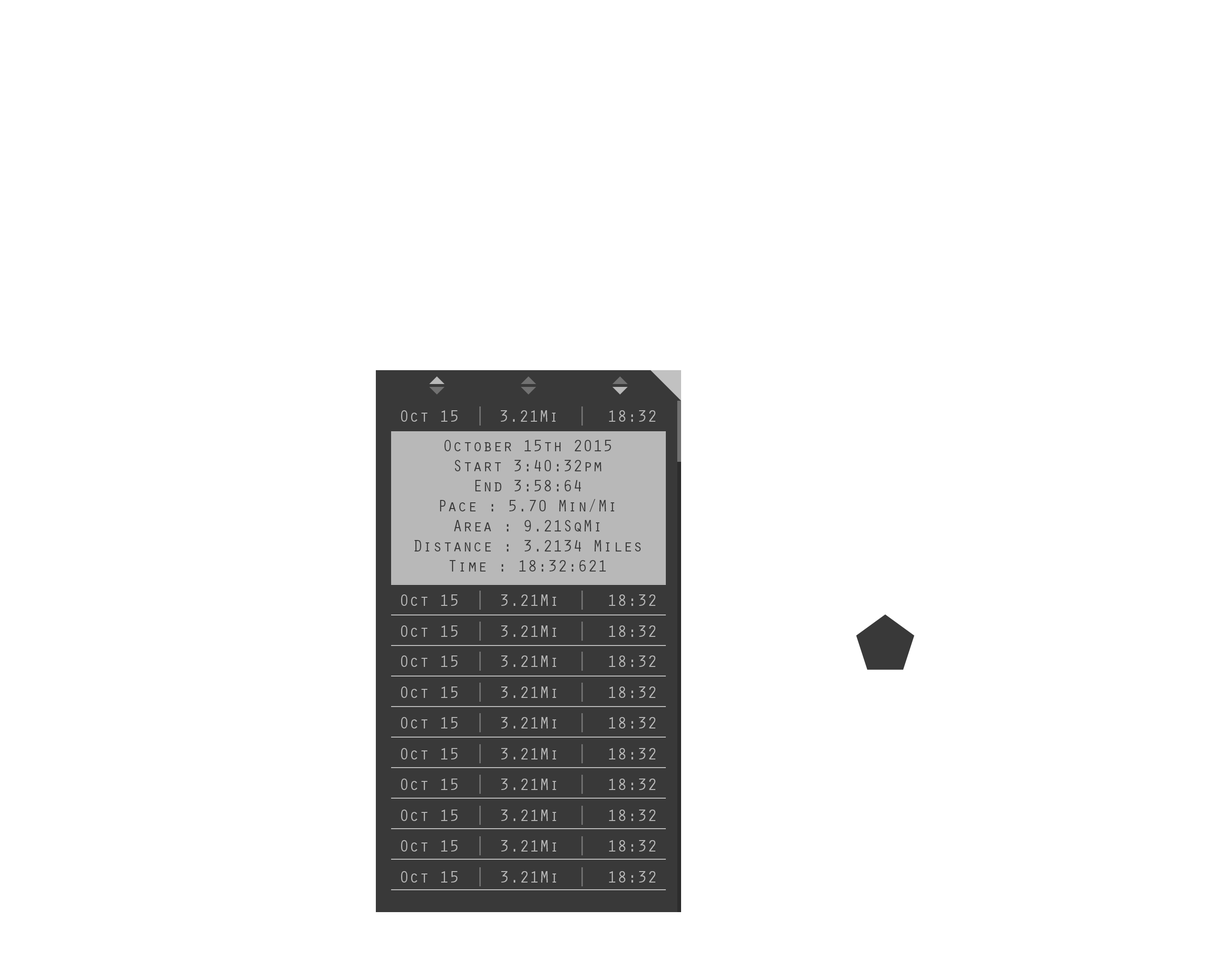
<style>
.page{position:relative;width:1221px;height:977px;background:#ffffff}
.page>*{position:absolute;margin:0}
.t1{font:16.7px "OratorStd";color:#b8b8b8}
.t2{font:16.7px "OratorStd";color:#393939}
</style>
<div class="page">
<p class="t1" style="left:401px;top:410px;width:56px;height:12px">Oct 15</p>
<p class="t1" style="left:501px;top:410px;width:55px;height:12px">3.21Mi</p>
<p class="t1" style="left:609px;top:410px;width:46px;height:12px">18:32</p>
<p class="t2" style="left:414px;top:440px;width:227px;height:131px;text-align:center">October 15th 2015<br>Start 3:40:32pm <br>End 3:58:64  <br>Pace : 5.70 Min/Mi<br>Area : 9.21SqMi <br>Distance : 3.2134 Miles<br>Time : 18:32:621</p>
<p class="t1" style="left:401px;top:594px;width:56px;height:12px">Oct 15</p>
<p class="t1" style="left:501px;top:594px;width:55px;height:12px">3.21Mi</p>
<p class="t1" style="left:609px;top:594px;width:46px;height:12px">18:32</p>
<p class="t1" style="left:401px;top:625px;width:56px;height:12px">Oct 15</p>
<p class="t1" style="left:501px;top:625px;width:55px;height:12px">3.21Mi</p>
<p class="t1" style="left:609px;top:625px;width:46px;height:12px">18:32</p>
<p class="t1" style="left:401px;top:655px;width:56px;height:12px">Oct 15</p>
<p class="t1" style="left:501px;top:655px;width:55px;height:12px">3.21Mi</p>
<p class="t1" style="left:609px;top:655px;width:46px;height:12px">18:32</p>
<p class="t1" style="left:401px;top:686px;width:56px;height:12px">Oct 15</p>
<p class="t1" style="left:501px;top:686px;width:55px;height:12px">3.21Mi</p>
<p class="t1" style="left:609px;top:686px;width:46px;height:12px">18:32</p>
<p class="t1" style="left:401px;top:717px;width:56px;height:11px">Oct 15</p>
<p class="t1" style="left:501px;top:717px;width:55px;height:11px">3.21Mi</p>
<p class="t1" style="left:609px;top:717px;width:46px;height:11px">18:32</p>
<p class="t1" style="left:401px;top:748px;width:56px;height:11px">Oct 15</p>
<p class="t1" style="left:501px;top:748px;width:55px;height:11px">3.21Mi</p>
<p class="t1" style="left:609px;top:748px;width:46px;height:11px">18:32</p>
<p class="t1" style="left:401px;top:778px;width:56px;height:12px">Oct 15</p>
<p class="t1" style="left:501px;top:778px;width:55px;height:12px">3.21Mi</p>
<p class="t1" style="left:609px;top:778px;width:46px;height:12px">18:32</p>
<p class="t1" style="left:401px;top:809px;width:56px;height:12px">Oct 15</p>
<p class="t1" style="left:501px;top:809px;width:55px;height:12px">3.21Mi</p>
<p class="t1" style="left:609px;top:809px;width:46px;height:12px">18:32</p>
<p class="t1" style="left:401px;top:840px;width:56px;height:11px">Oct 15</p>
<p class="t1" style="left:501px;top:840px;width:55px;height:11px">3.21Mi</p>
<p class="t1" style="left:609px;top:840px;width:46px;height:11px">18:32</p>
<p class="t1" style="left:401px;top:871px;width:56px;height:11px">Oct 15</p>
<p class="t1" style="left:501px;top:871px;width:55px;height:11px">3.21Mi</p>
<p class="t1" style="left:609px;top:871px;width:46px;height:11px">18:32</p>
</div>
